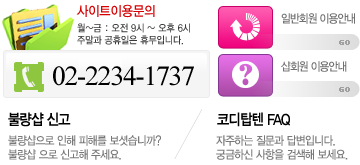
<style>
.page{position:relative;width:360px;height:165px;background:#ffffff}
.page>*{position:absolute;margin:0}
.t1{font:13.7px "YDIYGO330";letter-spacing:-0.015em;color:#d60001;scale:0.9 1}
.t2{font:11.7px/16px "YDIYGO330";letter-spacing:-0.075em;color:#707070;scale:0.91 1}
.t3{font:10px/12px "YDIYGO330";letter-spacing:-0.015em;color:#3b3b3b;scale:0.9 1}
.t4{font:28px "TimesNewRomanPSMT";letter-spacing:-0.05em;color:#000000}
.t5{font:15.4px "YDIYGO340";letter-spacing:-0.05em;color:#000000;scale:0.86 1}
.t6{font:11.7px/14px "YDIYGO330";letter-spacing:-0.05em;color:#787878;scale:0.91 1}
</style>
<div class="page">
<p class="t1" style="left:76px;top:4px;width:79px;height:14px">사이트이용문의</p>
<p class="t2" style="left:281px;top:13px;width:74px;height:59px">일반회원 이용안내<br><br><br>샵회원 이용안내</p>
<p class="t3" style="left:77px;top:23px;width:113px;height:22px">월~금 : 오전 9시 ~ 오후 6시<br>주말과 공휴일은 휴무입니다.</p>
<p class="t4" style="left:53px;top:66px;width:141px;height:20px">02-2234-1737</p>
<p class="t5" style="left:8px;top:112px;width:63px;height:15px">불량샵 신고</p>
<p class="t5" style="left:217px;top:112px;width:73px;height:15px">코디탑텐 FAQ</p>
<p class="t6" style="left:8px;top:135px;width:153px;height:25px">불량샵으로 인해 피해를 보셧습니까?<br>불량샵 으로 신고해 주세요.</p>
<p class="t6" style="left:216px;top:135px;width:132px;height:25px">자주하는 질문과 답변입니다.<br>궁금하신 사항을 검색해 보세요.</p>
</div>
